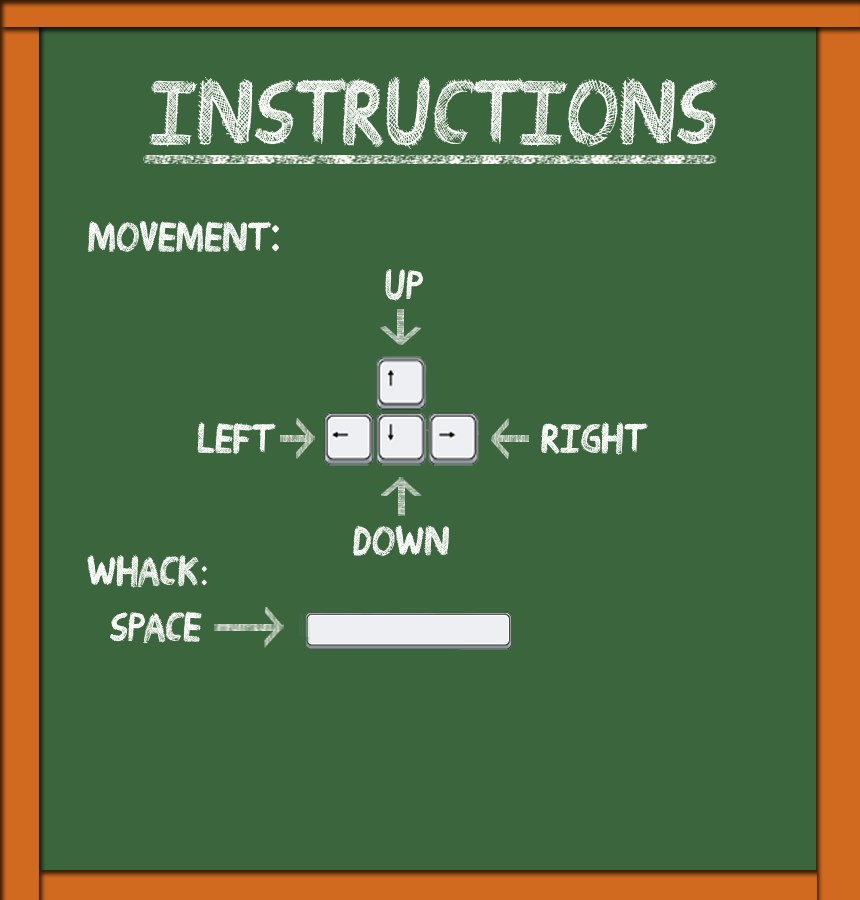
<style>
.page{position:relative;width:860px;height:900px;background:#3b653d}
.page>*{position:absolute;margin:0}
.t1{font:40px "Drawing-Guides";color:#fcfcfa}
.t2{font:55px "Drawing-Guides";color:#fcfcfa}
</style>
<div class="page">
<p class="t1" style="left:87px;top:220px;width:192px;height:33px">Movement<span class="t2">:</span></p>
<p class="t1" style="left:385px;top:269px;width:39px;height:33px">Up</p>
<p class="t1" style="left:197px;top:422px;width:79px;height:33px">Left</p>
<p class="t1" style="left:541px;top:422px;width:107px;height:34px">Right</p>
<p class="t1" style="left:353px;top:525px;width:96px;height:32px">Down</p>
<p class="t1" style="left:87px;top:554px;width:120px;height:34px">Whack:</p>
<p class="t1" style="left:110px;top:611px;width:92px;height:33px">Space</p>
</div>
